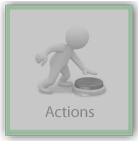
<style>
.page{position:relative;width:138px;height:141px;background:#c7c7c7}
.page>*{position:absolute;margin:0}
.t1{font:15.9px "MyriadPro-Regular";color:#868585}
</style>
<div class="page">
<p class="t1" style="left:45px;top:106px;width:49px;height:12px">Actions</p>
</div>
